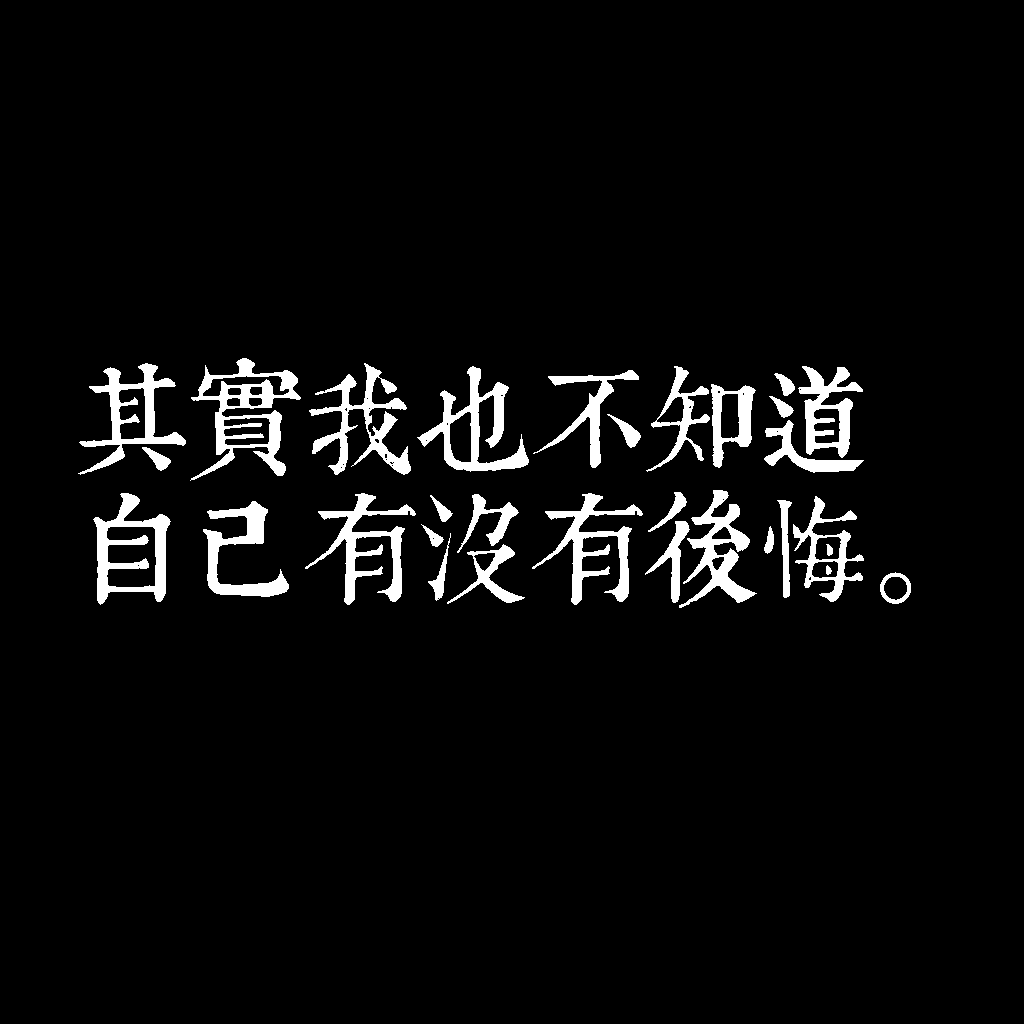
<style>
.page{position:relative;width:1024px;height:1024px;background:#000000}
.page>*{position:absolute;margin:0}
.t1{font:116px/130px "TpldKhangXiDictTrial";letter-spacing:-0.02em;color:#ffffff}
</style>
<div class="page">
<p class="t1" style="left:78px;top:358px;width:833px;height:250px">其實我也不知道<br>自己有沒有後悔。</p>
</div>
